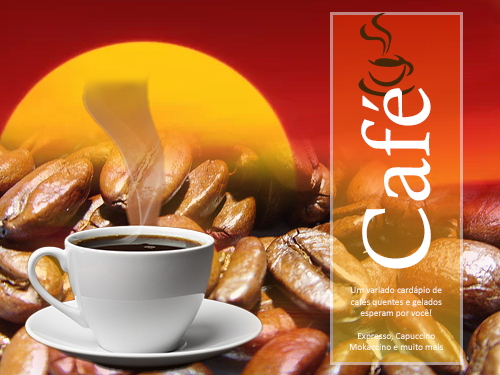
<style>
.page{position:relative;width:500px;height:375px}
.page>*{position:absolute;margin:0}
.t1{font:95px "CalistoMT";color:#ffffff}
.t2{font:9.5px "Calibri";color:#ffffff}
</style>
<div class="page">
<p class="t1" style="left:361px;top:88px;width:70px;height:181px;rotate:-90deg">Café</p>
<p class="t2" style="left:350px;top:286px;width:93px;height:64px;text-align:center">Um variado cardápio de<br>cafés quentes e gelados<br>esperam por você!<br><br>Expresso, Capuccino<br>Mokaccino e muito mais</p>
</div>
